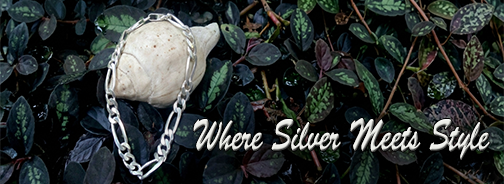
<style>
.page{position:relative;width:504px;height:184px}
.page>*{position:absolute;margin:0}
.t1{font:45.1px "BrushScriptStd";color:#ebece7;scale:0.62 1}
</style>
<div class="page">
<p class="t1" style="left:193px;top:118px;width:297px;height:42px">Where Silver Meets Style</p>
</div>
